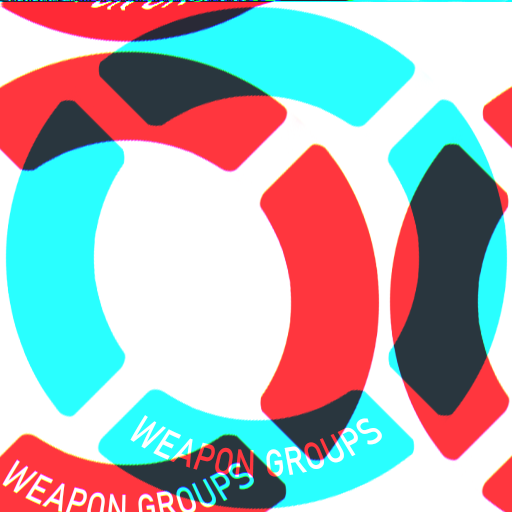
<style>
.page{position:relative;width:512px;height:512px;background:#ffffff}
.page>*{position:absolute;margin:0}
.t1{font:30.3px "Bahnschrift"}
</style>
<div class="page">
<p class="t1" style="left:130px;top:413px;width:252px;height:63px;text-align:center">WEAPON GROUPS</p>
</div>
